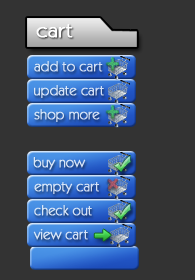
<style>
.page{position:relative;width:195px;height:280px;background:#333333}
.page>*{position:absolute;margin:0}
.t1{font:20px "KabelITCbyBT-Book";color:#ffffff;font-weight:bold;scale:1.09 1}
.t2{font:14px "KabelITCbyBT-Book";color:#d8e5f8;font-weight:bold}
.t3{font:14px "KabelITCbyBT-Book";color:#d7e4f7;font-weight:bold}
.t4{font:14px "KabelITCbyBT-Book";color:#d6e3f7;font-weight:bold}
.t5{font:14px "KabelITCbyBT-Book";color:#d8e5f8;font-weight:bold;scale:0.97 1}
.t6{font:14px "KabelITCbyBT-Book";color:#d7e3f7;font-weight:bold}
.t7{font:14px "KabelITCbyBT-Book";color:#d7e4f7;font-weight:bold;scale:0.97 1}
</style>
<div class="page">
<p class="t1" style="left:36px;top:24px;width:37px;height:14px">cart</p>
<p class="t2" style="left:34px;top:61px;width:69px;height:11px">add to cart</p>
<p class="t3" style="left:34px;top:85px;width:70px;height:13px">update cart</p>
<p class="t4" style="left:34px;top:109px;width:66px;height:13px">shop more</p>
<p class="t5" style="left:33px;top:157px;width:53px;height:13px">buy now</p>
<p class="t6" style="left:34px;top:182px;width:65px;height:12px">empty cart</p>
<p class="t7" style="left:34px;top:205px;width:58px;height:11px">check out</p>
<p class="t7" style="left:33px;top:229px;width:55px;height:11px">view cart</p>
</div>
